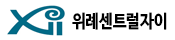
<style>
.page{position:relative;width:175px;height:40px;background:#ffffff}
.page>*{position:absolute;margin:0}
.t1{font:18px "NanumBarunGothicOTFBold";color:#000000;scale:0.85 1}
</style>
<div class="page">
<p class="t1" style="left:72px;top:12px;width:95px;height:18px">위례센트럴자이</p>
</div>
